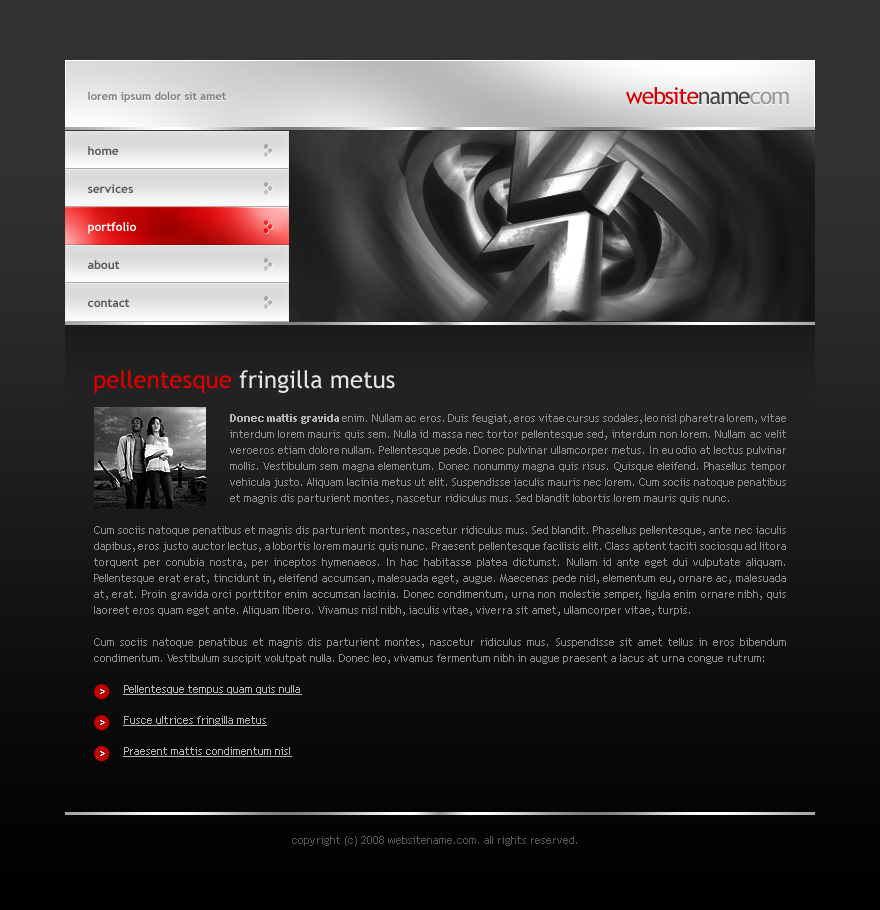
<style>
.page{position:relative;width:880px;height:910px}
.page>*{position:absolute;margin:0}
.t1{font:23px "TrebuchetMS";letter-spacing:-0.05em;color:#d10000}
.t2{font:23px "TrebuchetMS";letter-spacing:-0.05em;color:#454545}
.t3{font:23px "TrebuchetMS";letter-spacing:-0.05em;color:#979797}
.t4{font:11px "TrebuchetMS-Bold";color:#808080}
.t5{font:12px/38px "TrebuchetMS-Bold";color:#595959}
.t6{font:12px/38px "TrebuchetMS-Bold";color:#ffffff}
.t7{font:24px "TrebuchetMS";color:#e4e4e4}
.t8{font:24px "TrebuchetMS";color:#e10000}
.t9{font:11px/16px "TrebuchetMS";color:#8e8e8e}
.t10{font:11px/16px "TrebuchetMS-Bold";color:#b5b5b5}
.t11{font:11px/31px "TrebuchetMS";color:#b5b5b5;text-decoration:underline}
.t12{font:11px "TrebuchetMS";color:#565656}
</style>
<div class="page">
<p class="t1" style="left:626px;top:87px;width:163px;height:18px">website<span class="t2">name</span><span class="t3">com</span></p>
<p class="t4" style="left:88px;top:91px;width:138px;height:12px">lorem ipsum dolor sit amet</p>
<p class="t5" style="left:88px;top:146px;width:48px;height:161px">home<br>services<br><span class="t6">portfolio<br></span>about<br>contact</p>
<p class="t7" style="left:94px;top:370px;width:301px;height:23px"><span class="t8">pellentesque </span>fringilla metus</p>
<p class="t9" style="left:94px;top:414px;width:692px;height:343px;text-align:justify"><span class="t10">Donec mattis gravida</span> enim. Nullam ac eros. Duis feugiat, eros vitae cursus sodales, leo nisl pharetra lorem, vitae interdum lorem mauris quis sem. Nulla id massa nec tortor pellentesque sed, interdum non lorem. Nullam ac velit veroeros etiam dolore nullam. Pellentesque pede. Donec pulvinar ullamcorper metus. In eu odio at lectus pulvinar mollis. Vestibulum sem magna elementum. Donec nonummy magna quis risus. Quisque eleifend. Phasellus tempor vehicula justo. Aliquam lacinia metus ut elit. Suspendisse iaculis mauris nec lorem. Cum sociis natoque penatibus et magnis dis parturient montes, nascetur ridiculus mus. Sed blandit lobortis lorem mauris quis nunc. <br><br>Cum sociis natoque penatibus et magnis dis parturient montes, nascetur ridiculus mus. Sed blandit. Phasellus pellentesque, ante nec iaculis dapibus, eros justo auctor lectus, a lobortis lorem mauris quis nunc. Praesent pellentesque facilisis elit. Class aptent taciti sociosqu ad litora torquent per conubia nostra, per inceptos hymenaeos. In hac habitasse platea dictumst. Nullam id ante eget dui vulputate aliquam. Pellentesque erat erat, tincidunt in, eleifend accumsan, malesuada eget, augue. Maecenas pede nisl, elementum eu, ornare ac, malesuada at, erat. Proin gravida orci porttitor enim accumsan lacinia. Donec condimentum, urna non molestie semper, ligula enim ornare nibh, quis laoreet eros quam eget ante. Aliquam libero. Vivamus nisl nibh, iaculis vitae, viverra sit amet, ullamcorper vitae, turpis. <br><br>Cum sociis natoque penatibus et magnis dis parturient montes, nascetur ridiculus mus. Suspendisse sit amet tellus in eros bibendum condimentum. Vestibulum suscipit volutpat nulla. Donec leo, vivamus fermentum nibh in augue praesent a lacus at urna congue rutrum:<br><span class="t11">Pellentesque tempus quam quis nulla<br>Fusce ultrices fringilla metus<br>Praesent mattis condimentum nisl</span></p>
<p class="t12" style="left:292px;top:836px;width:285px;height:10px">copyright (c) 2008 websitename.com. all rights reserved.</p>
</div>
